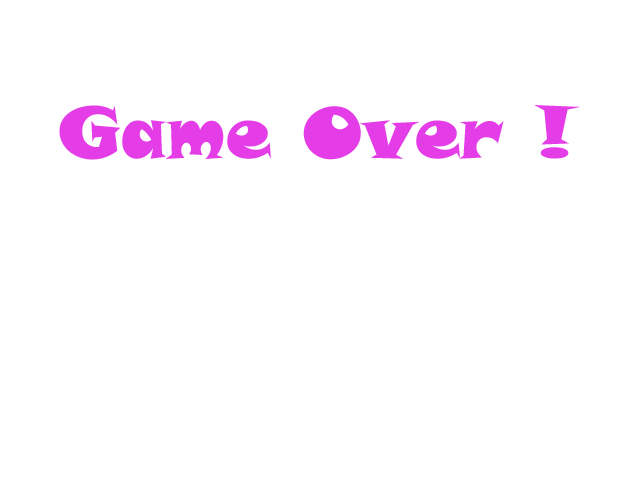
<style>
.page{position:relative;width:640px;height:480px;background:#ffffff}
.page>*{position:absolute;margin:0}
.t1{font:72px "SnapITC-Regular";color:#e43ce6}
</style>
<div class="page">
<p class="t1" style="left:59px;top:105px;width:521px;height:55px">Game Over !</p>
</div>
